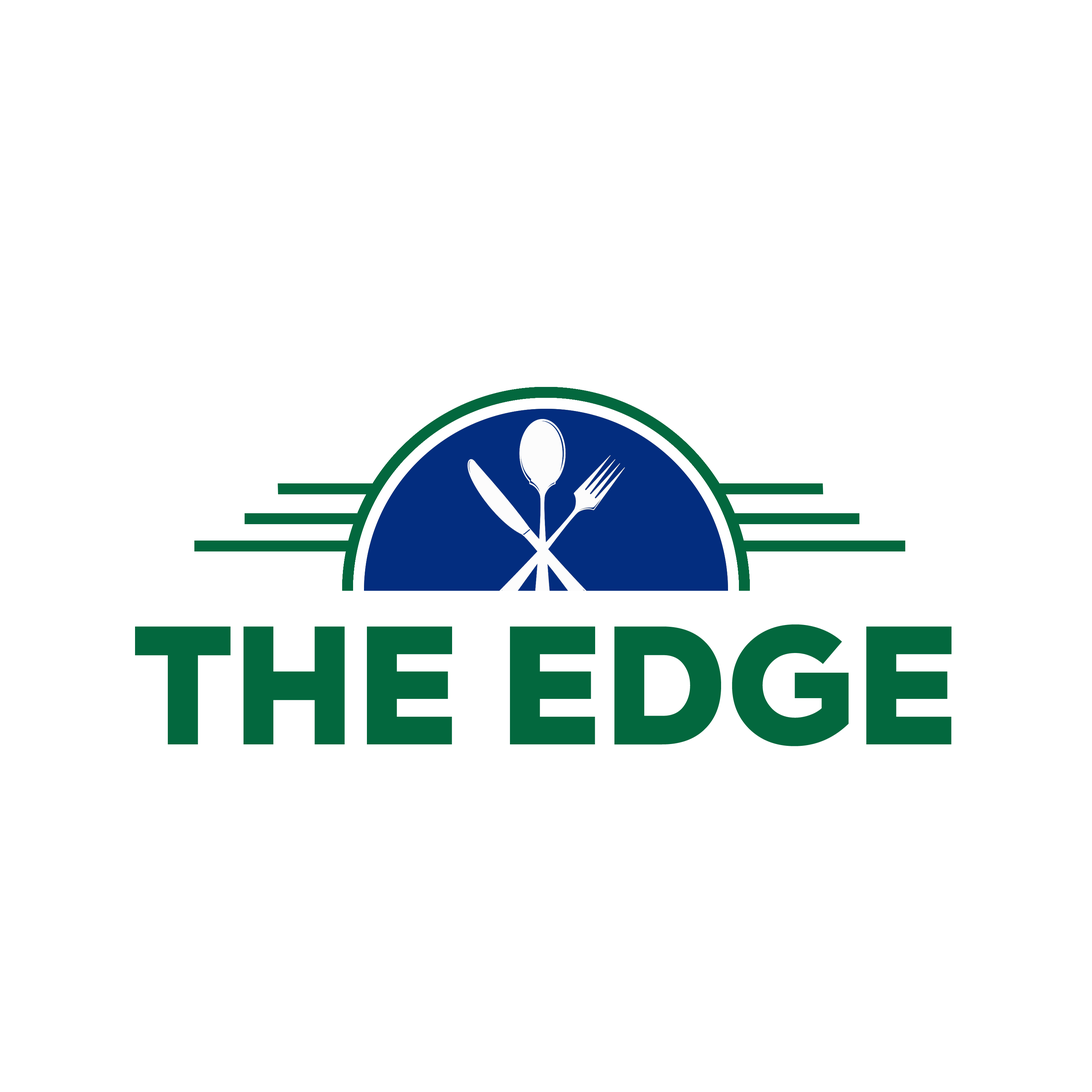
<style>
.page{position:relative;width:1092px;height:1092px;background:#ffffff}
.page>*{position:absolute;margin:0}
.t1{font:159.5px "Axiforma-Black";letter-spacing:-0.005em;color:#03683e}
</style>
<div class="page">
<p class="t1" style="left:135px;top:624px;width:816px;height:122px">THE EDGE</p>
</div>
